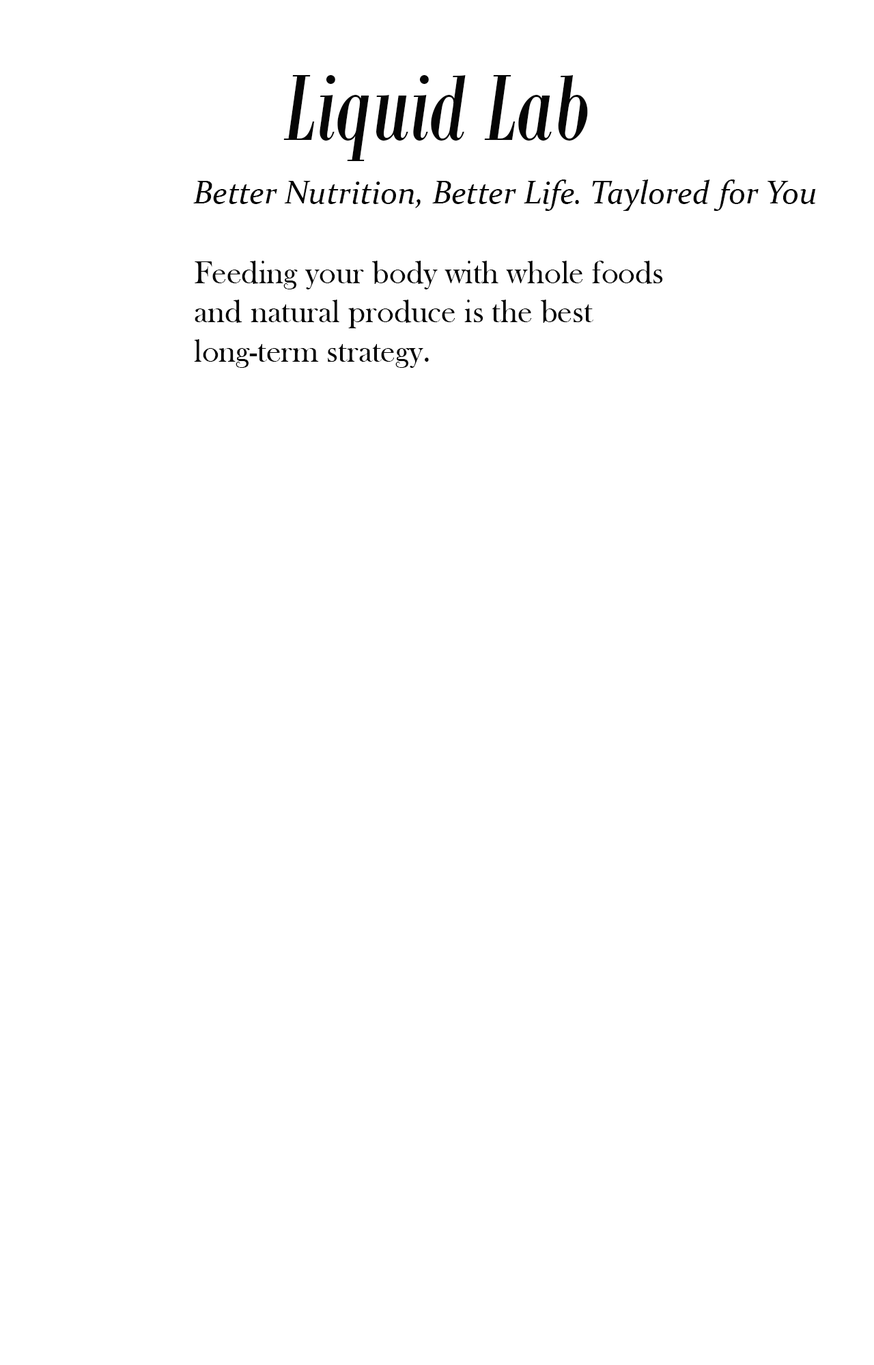
<style>
.page{position:relative;width:874px;height:1365px;background:#ffffff}
.page>*{position:absolute;margin:0}
.t1{font:102.4px "BodoniMTCondensed-Italic";color:#050505}
.t2{font:32.8px "Constantia-Italic";color:#050505}
.t3{font:32.8px "BaskOldFace";color:#050505}
</style>
<div class="page">
<p class="t1" style="left:283px;top:75px;width:305px;height:86px">Liquid Lab</p>
<p class="t2" style="left:193px;top:179px;width:623px;height:32px">Better Nutrition, Better Life. Taylored for You</p>
<p class="t3" style="left:194px;top:261px;width:469px;height:107px">Feeding your body with whole foods and natural produce is the best long-term strategy.</p>
</div>
